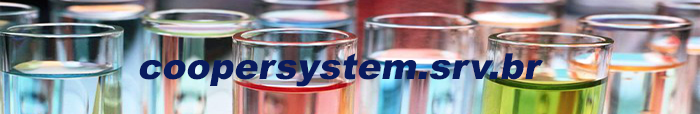
<style>
.page{position:relative;width:700px;height:114px}
.page>*{position:absolute;margin:0}
.t1{font:36px "Arial-Black";color:#091b5e;font-style:italic}
</style>
<div class="page">
<p class="t1" style="left:139px;top:53px;width:404px;height:34px">coopersystem.srv.br</p>
</div>
